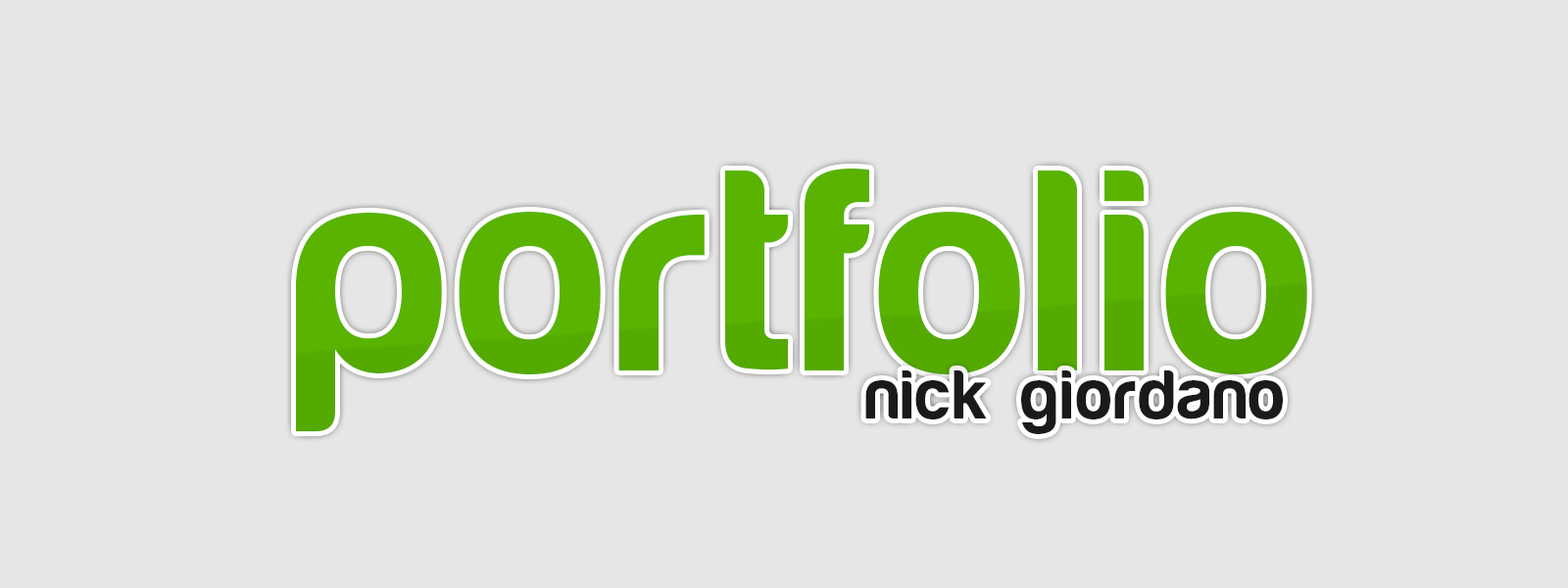
<style>
.page{position:relative;width:1568px;height:588px;background:#e6e6e6}
.page>*{position:absolute;margin:0}
.t1{font:294px "HarabaraMaisBold-HarabaraMaisBold";color:#59b300}
.t2{font:70.6px "HarabaraMaisBold-HarabaraMaisBold";color:#1a1a1a}
</style>
<div class="page">
<p class="t1" style="left:296px;top:169px;width:1011px;height:263px">portfolio</p>
<p class="t2" style="left:865px;top:370px;width:418px;height:64px">nick giordano</p>
</div>
